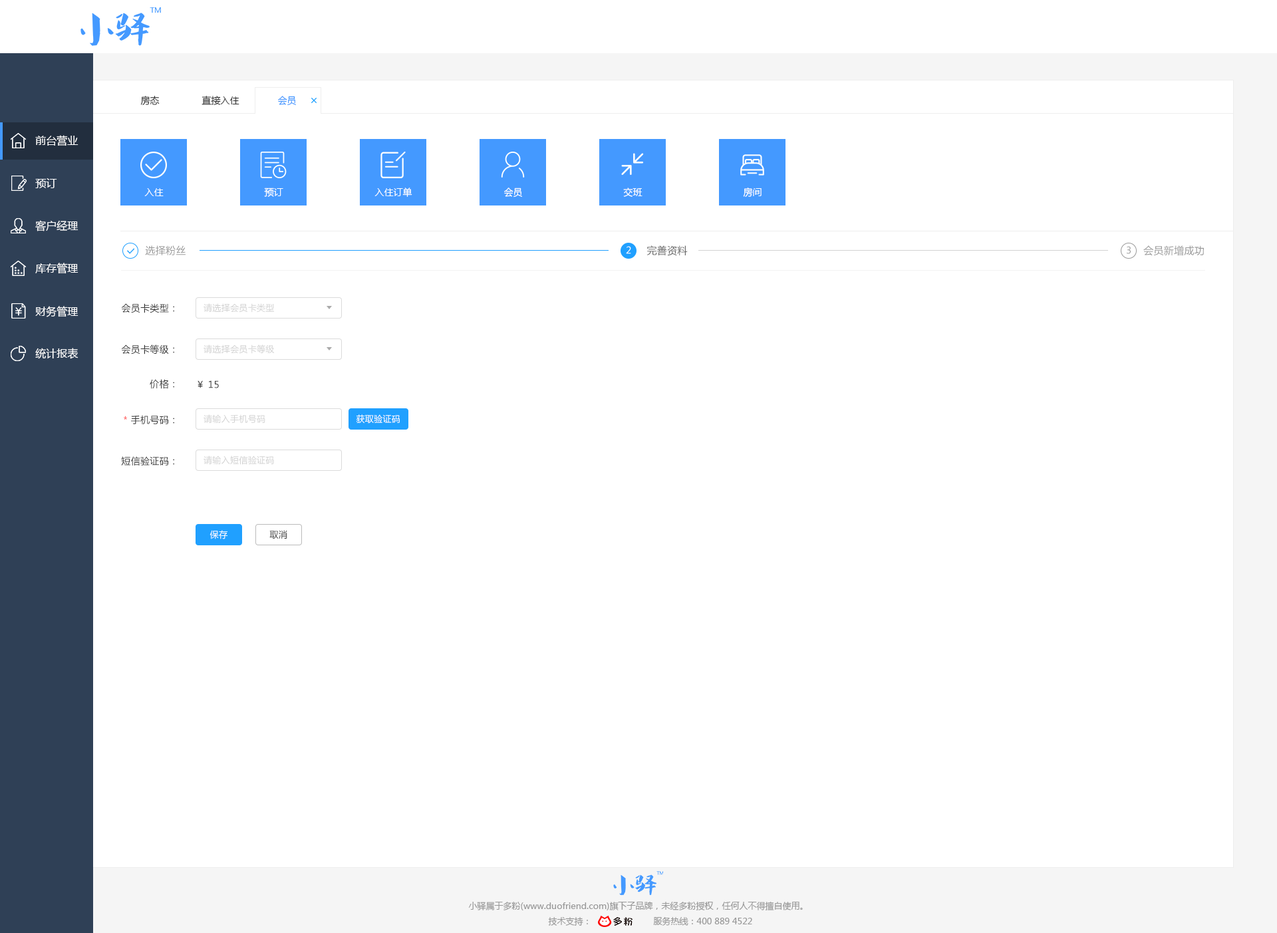
<style>
.page{position:relative;width:1277px;height:933px;background:#ffffff}
.page>*{position:absolute;margin:0}
.t1{font:9.3px "MicrosoftYaHei";color:#333333}
.t2{font:9.3px "MicrosoftYaHei";color:#4499ff}
.t3{font:10.6px "MicrosoftYaHei";color:#ffffff}
.t4{font:9.3px "MicrosoftYaHei";color:#ffffff}
.t5{font:10px "MicrosoftYaHei";letter-spacing:0.025em;color:#999999}
.t6{font:10px "MicrosoftYaHei";letter-spacing:0.025em;color:#666666}
.t7{font:9.3px "MicrosoftYaHei";letter-spacing:0.025em;color:#ffffff}
.t8{font:9.3px "MicrosoftYaHei";letter-spacing:0.025em;color:#999999}
.t9{font:9.3px "MicrosoftYaHei";letter-spacing:0.025em;color:#333333}
.t10{font:8.6px "MicrosoftYaHei";letter-spacing:0.025em;color:#d2d2d2}
.t11{font:9.3px "MicrosoftYaHei";letter-spacing:0.025em;color:#ff4949}
.t12{font:8.6px "MicrosoftYaHei";letter-spacing:0.025em;color:#ffffff}
.t13{font:8.6px "MicrosoftYaHei";letter-spacing:0.025em;color:#333333}
.t14{font:8.6px "MicrosoftYaHei";color:#999999}
</style>
<div class="page">
<p class="t1" style="left:140px;top:96px;width:20px;height:9px">房态</p>
<p class="t1" style="left:202px;top:96px;width:38px;height:9px">直接入住</p>
<p class="t2" style="left:278px;top:96px;width:18px;height:10px">会员</p>
<p class="t3" style="left:35px;top:135px;width:44px;height:11px">前台营业</p>
<p class="t3" style="left:35px;top:178px;width:22px;height:10px">预订</p>
<p class="t4" style="left:144px;top:188px;width:20px;height:8px">入住</p>
<p class="t4" style="left:264px;top:188px;width:19px;height:9px">预订</p>
<p class="t4" style="left:375px;top:188px;width:38px;height:9px">入住订单</p>
<p class="t4" style="left:504px;top:188px;width:18px;height:10px">会员</p>
<p class="t4" style="left:623px;top:188px;width:20px;height:9px">交班</p>
<p class="t4" style="left:743px;top:188px;width:19px;height:9px">房间</p>
<p class="t3" style="left:35px;top:220px;width:44px;height:12px">客户经理</p>
<p class="t5" style="left:145px;top:246px;width:41px;height:9px">选择粉丝</p>
<p class="t6" style="left:647px;top:246px;width:41px;height:10px">完善资料</p>
<p class="t5" style="left:1144px;top:246px;width:60px;height:10px">会员新增成功</p>
<p class="t7" style="left:626px;top:246px;width:5px;height:8px">2</p>
<p class="t8" style="left:1127px;top:246px;width:4px;height:8px">3</p>
<p class="t3" style="left:35px;top:263px;width:44px;height:11px">库存管理</p>
<p class="t9" style="left:121px;top:303px;width:53px;height:10px">会员卡类型：</p>
<p class="t10" style="left:204px;top:303px;width:70px;height:10px">请选择会员卡类型</p>
<p class="t3" style="left:35px;top:306px;width:44px;height:11px">财务管理</p>
<p class="t3" style="left:35px;top:348px;width:44px;height:11px">统计报表</p>
<p class="t9" style="left:121px;top:345px;width:53px;height:10px">会员卡等级：</p>
<p class="t10" style="left:204px;top:345px;width:71px;height:9px">请选择会员卡等级</p>
<p class="t9" style="left:150px;top:379px;width:24px;height:10px">价格：</p>
<p class="t9" style="left:198px;top:381px;width:21px;height:8px">￥ 15</p>
<p class="t9" style="left:124px;top:415px;width:50px;height:10px"><span class="t11">*</span> 手机号码：</p>
<p class="t10" style="left:204px;top:415px;width:61px;height:9px">请输入手机号码</p>
<p class="t12" style="left:356px;top:415px;width:44px;height:9px">获取验证码</p>
<p class="t9" style="left:121px;top:456px;width:53px;height:10px">短信验证码：</p>
<p class="t10" style="left:204px;top:456px;width:70px;height:9px">请输入短信验证码</p>
<p class="t12" style="left:210px;top:530px;width:18px;height:10px">保存</p>
<p class="t13" style="left:269px;top:530px;width:18px;height:10px">取消</p>
<p class="t14" style="left:468px;top:902px;width:335px;height:9px">小驿属于多粉(www.duofriend.com)旗下子品牌，未经多粉授权，任何人不得擅自使用。</p>
<p class="t14" style="left:548px;top:917px;width:40px;height:9px">技术支持：</p>
<p class="t14" style="left:653px;top:917px;width:99px;height:9px">服务热线：400 889 4522</p>
</div>
